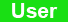
<style>
.page{position:relative;width:68px;height:22px;background:#19df14}
.page>*{position:absolute;margin:0}
.t1{font:20.9px "Arial-BoldMT";color:#fefefe}
</style>
<div class="page">
<p class="t1" style="left:12px;top:3px;width:46px;height:15px">User</p>
</div>
